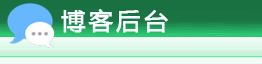
<style>
.page{position:relative;width:262px;height:64px}
.page>*{position:absolute;margin:0}
.t1{font:24px "MicrosoftYaHei";letter-spacing:0.12em;color:#f5fefe;font-weight:bold}
</style>
<div class="page">
<p class="t1" style="left:61px;top:9px;width:107px;height:24px">博客后台</p>
</div>
